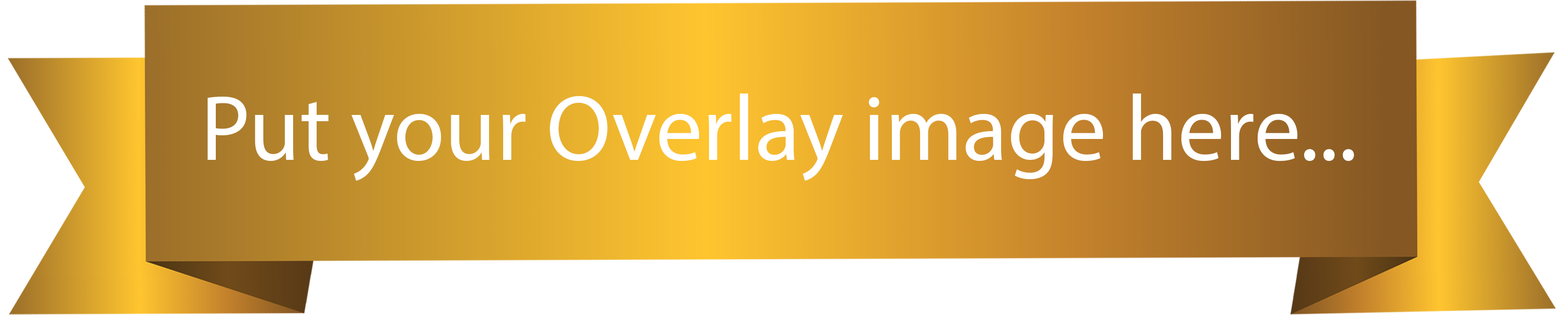
<style>
.page{position:relative;width:1568px;height:315px;background:#ffffff}
.page>*{position:absolute;margin:0}
.t1{font:93.2px "MyriadPro-Regular";color:#ffffff}
</style>
<div class="page">
<p class="t1" style="left:207px;top:94px;width:1147px;height:87px">Put your Overlay image here...</p>
</div>
